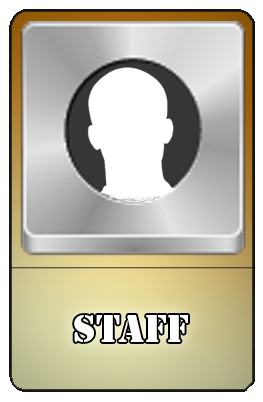
<style>
.page{position:relative;width:263px;height:402px;background:#ffffff}
.page>*{position:absolute;margin:0}
.t1{font:36px "StencilStd";color:#ffffff}
</style>
<div class="page">
<p class="t1" style="left:74px;top:315px;width:114px;height:27px">STAFF</p>
</div>
